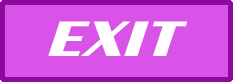
<style>
.page{position:relative;width:233px;height:82px;background:#d953e9}
.page>*{position:absolute;margin:0}
.t1{font:56.4px "Motorwerk";color:#ffffff}
</style>
<div class="page">
<p class="t1" style="left:48px;top:21px;width:140px;height:35px">Exit</p>
</div>
